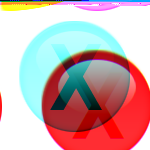
<style>
.page{position:relative;width:150px;height:150px;background:#ffffff}
.page>*{position:absolute;margin:0}
.t1{font:90px "Menlo-Bold"}
</style>
<div class="page">
<p class="t1" style="left:50px;top:42px;width:52px;height:66px">X</p>
</div>
